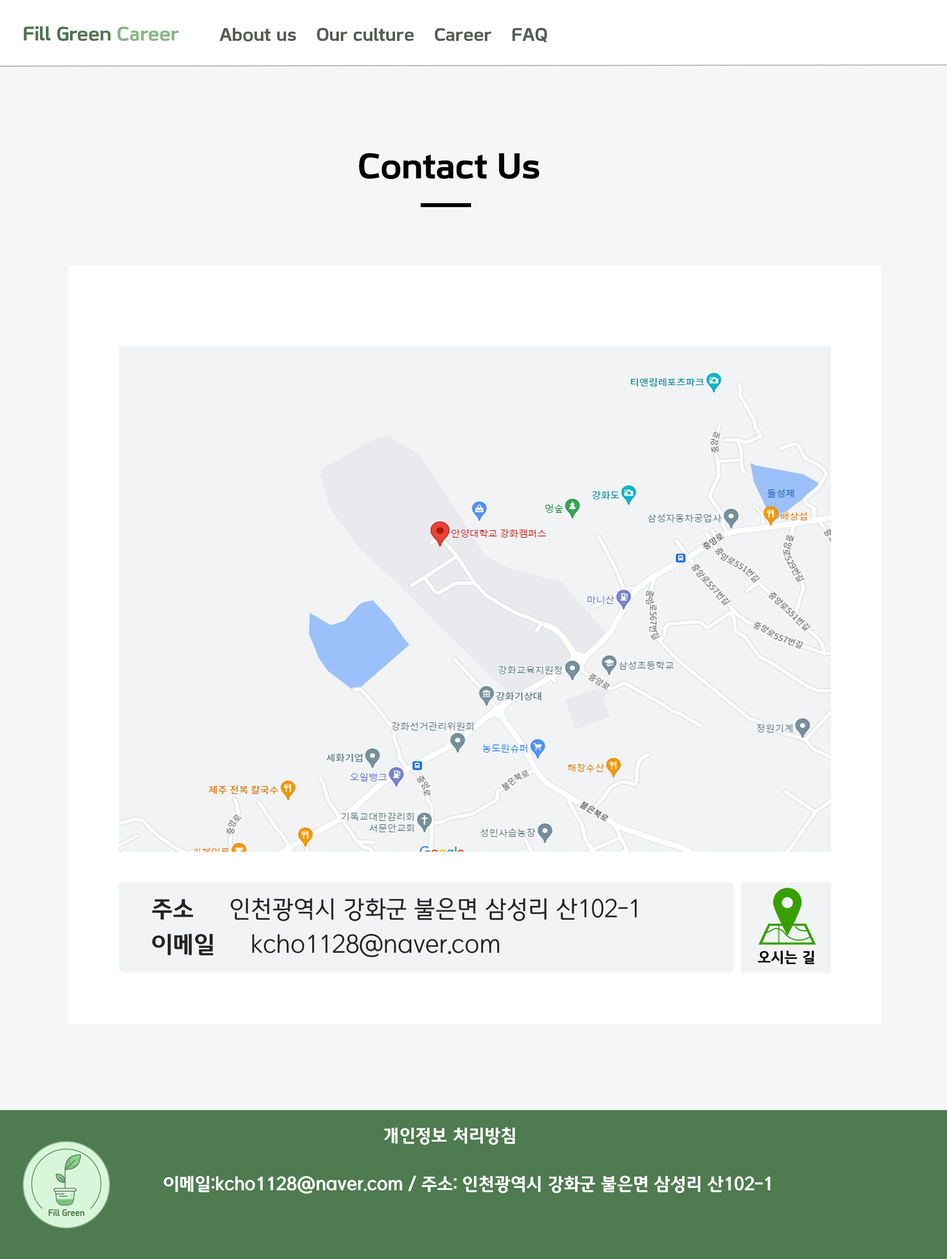
<style>
.page{position:relative;width:947px;height:1259px;background:#f7f6f6}
.page>*{position:absolute;margin:0}
.t1{font:19.7px "KOFIHDrLEEJWOTF-B";color:#517552}
.t2{font:19.7px "KOFIHDrLEEJWOTF-B";color:#86b687}
.t3{font:18.2px "KOFIHDrLEEJWOTF-B";color:#575a57}
.t4{font:35.5px "KOFIHDrLEEJWOTF-B";color:#000000}
.t5{font:23.7px/35.5px "MICEGothicOTF";color:#242524}
.t6{font:23.7px/35.5px "MICEGothicOTFBold";color:#242524}
.t7{font:14.8px "MICEGothicOTFBold";color:#000000}
.t8{font:17.8px "MICEGothicOTFBold";color:#ffffff}
</style>
<div class="page">
<p class="t1" style="left:24px;top:26px;width:155px;height:15px">Fill Green <span class="t2">Career</span></p>
<p class="t3" style="left:219px;top:28px;width:328px;height:14px">About us    Our culture    Career    FAQ</p>
<p class="t4" style="left:359px;top:153px;width:181px;height:26px">Contact Us</p>
<p class="t5" style="left:152px;top:898px;width:485px;height:59px"><span class="t6">주소     </span>인천광역시 강화군 불은면 삼성리 산102-1<span class="t6"> <br>이메일     </span>kcho1128@naver.com</p>
<p class="t7" style="left:758px;top:950px;width:56px;height:15px">오시는 길</p>
<p class="t8" style="left:384px;top:1128px;width:131px;height:17px">개인정보 처리방침</p>
<p class="t8" style="left:164px;top:1176px;width:606px;height:18px">이메일:kcho1128@naver.com / 주소: 인천광역시 강화군 불은면 삼성리 산102-1</p>
</div>
